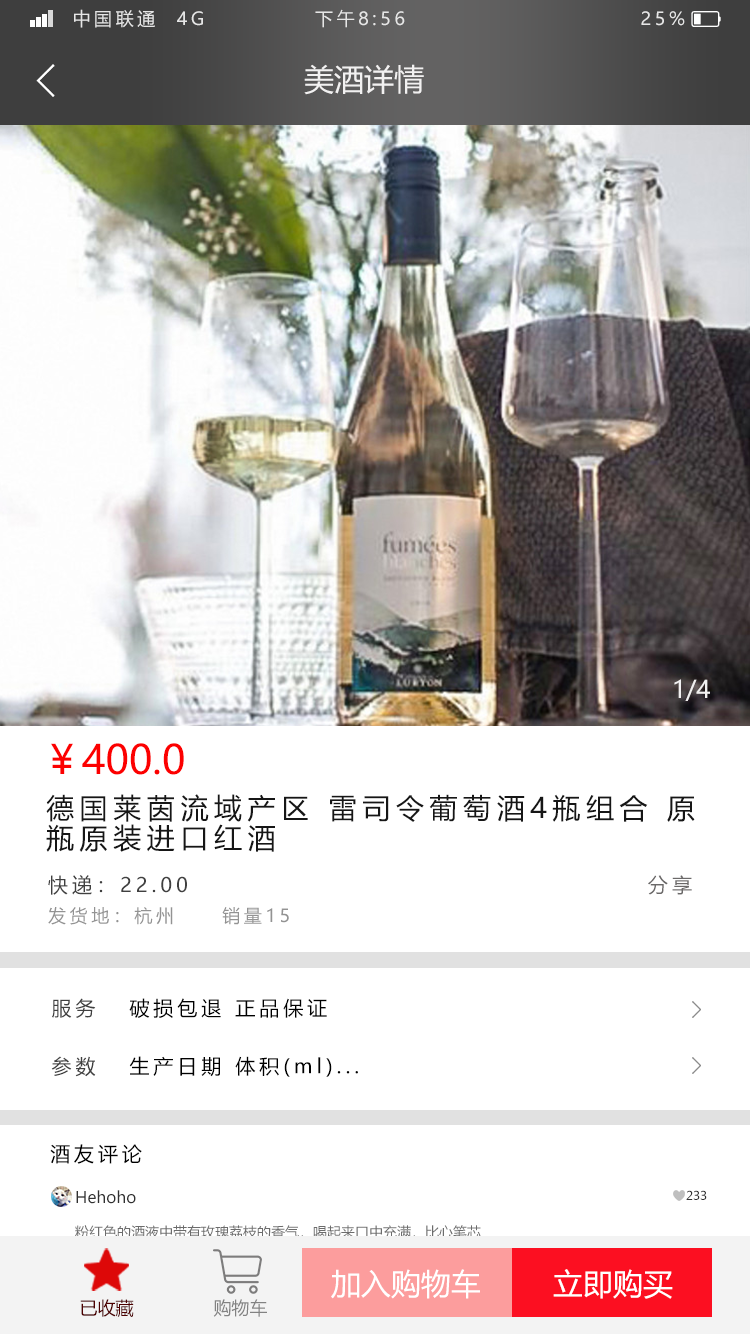
<style>
.page{position:relative;width:750px;height:1334px;background:#ffffff}
.page>*{position:absolute;margin:0}
.t1{font:18px "MicrosoftYaHei";letter-spacing:0.2em;color:#e6e6e6}
.t2{font:30px "MicrosoftYaHei";color:#f2f1f1}
.t3{font:24px "MicrosoftYaHei";color:#f2f1f1}
.t4{font:40px "MicrosoftYaHei";color:#fc0000}
.t5{font:28px/30px "MicrosoftYaHei";letter-spacing:0.2em;color:#161616}
.t6{font:20px "MicrosoftYaHei";letter-spacing:0.2em;color:#404040}
.t7{font:20px "MicrosoftYaHei";letter-spacing:0.2em;color:#6b6969}
.t8{font:18px "MicrosoftYaHei";letter-spacing:0.2em;color:#939393}
.t9{font:20px "MicrosoftYaHei";letter-spacing:0.2em;color:#000000}
.t10{font:16px "MicrosoftYaHei";color:#303030}
.t11{font:12px "MicrosoftYaHei";color:#303030}
.t12{font:14px "MicrosoftYaHei";color:#6c6c6c}
.t13{font:30px "MicrosoftYaHei";color:#ffffff}
.t14{font:18px "MicrosoftYaHei";color:#4d0000}
.t15{font:18px "MicrosoftYaHei";color:#828282}
</style>
<div class="page">
<p class="t1" style="left:74px;top:9px;width:611px;height:19px">中国联通  4G            下午8:56                          25%</p>
<p class="t2" style="left:304px;top:64px;width:120px;height:31px">美酒详情</p>
<p class="t3" style="left:674px;top:679px;width:36px;height:22px">1/4</p>
<p class="t4" style="left:51px;top:743px;width:133px;height:32px">￥400.0</p>
<p class="t5" style="left:46px;top:794px;width:649px;height:58px">德国莱茵流域产区 雷司令葡萄酒4瓶组合 原<br>瓶原装进口红酒</p>
<p class="t6" style="left:48px;top:875px;width:644px;height:20px">快递：22.00                                              <span class="t7">分享</span></p>
<p class="t8" style="left:48px;top:907px;width:241px;height:18px">发货地：杭州     销量15</p>
<p class="t9" style="left:52px;top:998px;width:275px;height:20px"><span class="t6">服务   </span>破损包退 正品保证</p>
<p class="t9" style="left:51px;top:1056px;width:307px;height:21px"><span class="t6">参数   </span>生产日期 体积(ml)...</p>
<p class="t9" style="left:50px;top:1144px;width:92px;height:20px">酒友评论</p>
<p class="t10" style="left:76px;top:1190px;width:60px;height:14px">Hehoho</p>
<p class="t11" style="left:686px;top:1190px;width:21px;height:10px">233</p>
<p class="t12" style="left:75px;top:1225px;width:406px;height:15px">粉红色的酒液中带有玫瑰荔枝的香气，喝起来口中充满，比心笔芯</p>
<p class="t13" style="left:331px;top:1269px;width:149px;height:30px">加入购物车</p>
<p class="t13" style="left:553px;top:1269px;width:120px;height:30px">立即购买</p>
<p class="t14" style="left:80px;top:1299px;width:187px;height:18px">已收藏<span class="t15">               购物车</span></p>
</div>
